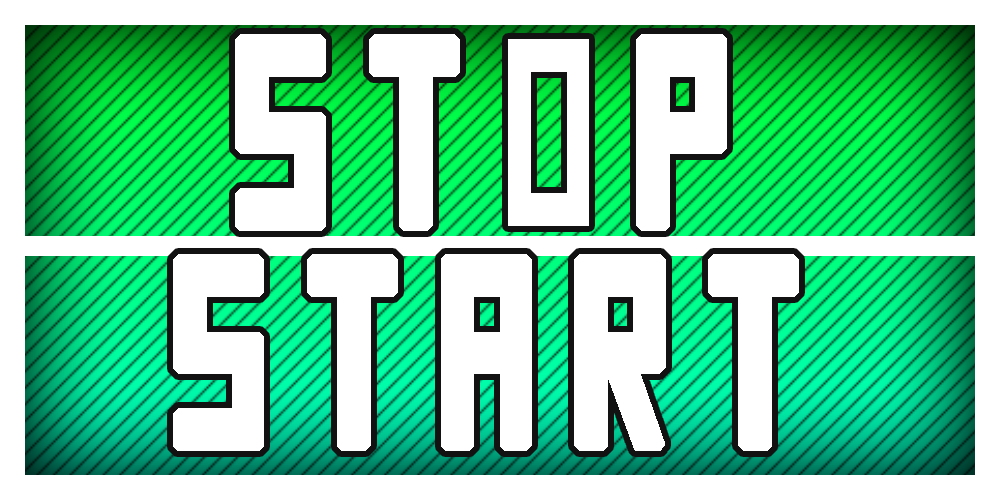
<style>
.page{position:relative;width:1000px;height:500px;background:#ffffff}
.page>*{position:absolute;margin:0}
.t1{font:265.5px "SquareFont";letter-spacing:0.2em;color:#ffffff;font-variant:small-caps;font-weight:bold;scale:0.63 1}
</style>
<div class="page">
<p class="t1" style="left:235px;top:34px;width:492px;height:197px">STOP</p>
<p class="t1" style="left:173px;top:254px;width:626px;height:197px">START</p>
</div>
